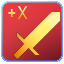
<style>
.page{position:relative;width:64px;height:64px}
.page>*{position:absolute;margin:0}
.t1{font:18px "Bahnschrift";letter-spacing:0.06em}
</style>
<div class="page">
<p class="t1" style="left:8px;top:6px;width:20px;height:14px">+X</p>
</div>
